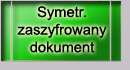
<style>
.page{position:relative;width:130px;height:70px}
.page>*{position:absolute;margin:0}
.t1{font:14.7px "ArialMT";color:#000000}
</style>
<div class="page">
<p class="t1" style="left:17px;top:6px;width:90px;height:47px;text-align:center">Symetr.<br>zaszyfrowany<br>dokument</p>
</div>
